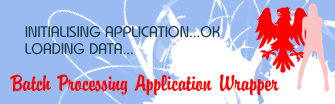
<style>
.page{position:relative;width:335px;height:104px;background:#9abbf1}
.page>*{position:absolute;margin:0}
.t1{font:14px "Belgium";color:#1e3b4d}
.t2{font:24px "Brandyscript";color:#ff0000}
</style>
<div class="page">
<p class="t1" style="left:25px;top:26px;width:195px;height:29px">INITIALISING APPLICATION...OK<br>LOADING DATA...</p>
<p class="t2" style="left:10px;top:74px;width:269px;height:22px">Batch Processing Application Wrapper</p>
</div>
